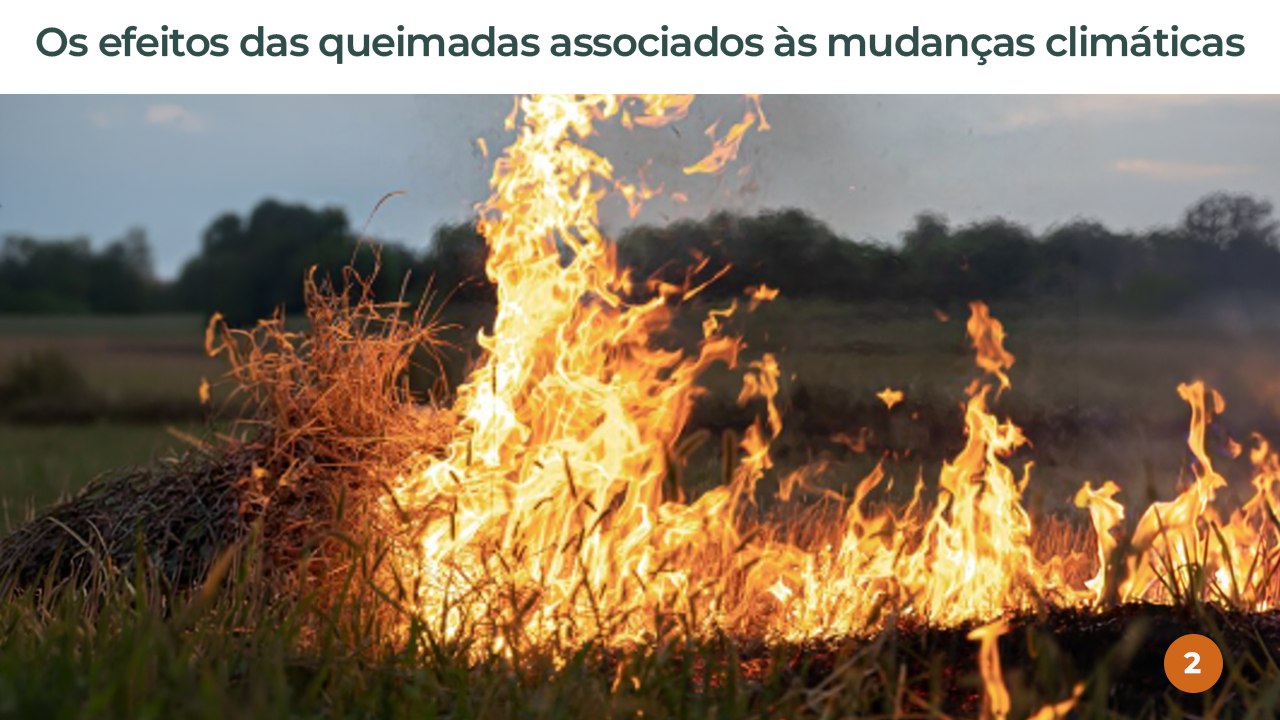
<style>
.page{position:relative;width:1280px;height:720px}
.page>*{position:absolute;margin:0}
.t1{font:40px "MontserratRoman-SemiBold";letter-spacing:-0.025em;color:#2f4e4a}
.t2{font:29px "MontserratRoman-Bold";letter-spacing:-0.025em;color:#ffffff}
</style>
<div class="page">
<p class="t1" style="left:36px;top:24px;width:1209px;height:42px">Os efeitos das queimadas associados às mudanças climáticas</p>
<p class="t2" style="left:1183px;top:652px;width:18px;height:22px">2</p>
</div>
